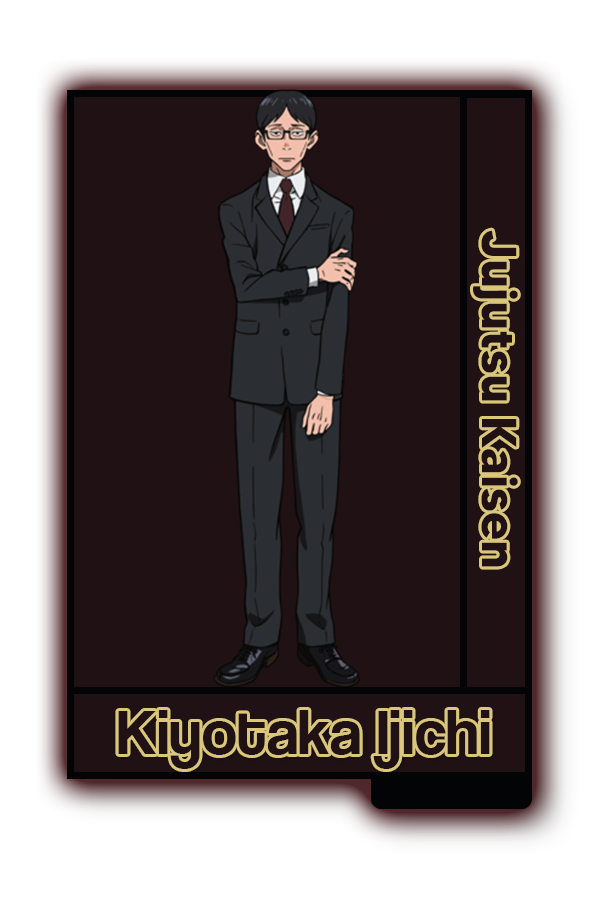
<style>
.page{position:relative;width:600px;height:900px;background:#1f1114}
.page>*{position:absolute;margin:0}
.t1{font:48.8px "MADETOMMY-Bold";color:#1e1214}
.t2{font:65.2px "CoolveticaRg-Regular";color:#1e1214}
</style>
<div class="page">
<p class="t1" style="left:473px;top:230px;width:45px;height:337px;rotate:90deg">Jujutsu Kaisen</p>
<p class="t2" style="left:118px;top:710px;width:372px;height:59px">Kiyotaka Ijichi</p>
</div>
